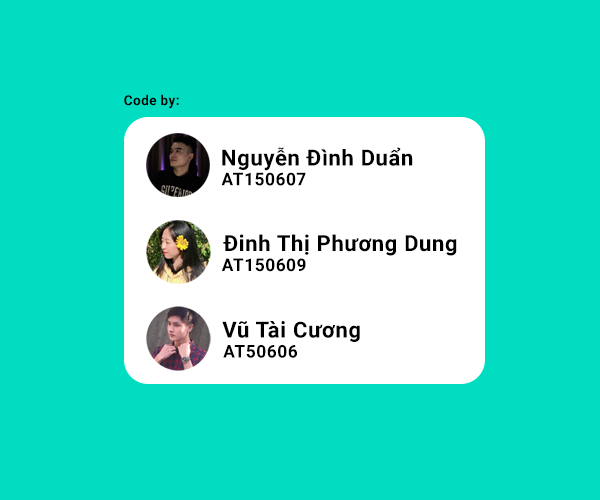
<style>
.page{position:relative;width:600px;height:500px;background:#00ddc1}
.page>*{position:absolute;margin:0}
.t1{font:13.5px "Roboto-Bold";letter-spacing:0.03em;color:#000000}
.t2{font:22px "Roboto-Bold";letter-spacing:0.03em;color:#000000}
.t3{font:17.4px "Roboto-Bold";letter-spacing:0.03em;color:#000000}
</style>
<div class="page">
<p class="t1" style="left:124px;top:94px;width:55px;height:14px">Code by:</p>
<p class="t2" style="left:222px;top:147px;width:191px;height:24px">Nguyễn Đình Duẩn</p>
<p class="t3" style="left:221px;top:172px;width:85px;height:14px">AT150607</p>
<p class="t2" style="left:223px;top:234px;width:234px;height:22px">Đinh Thị Phương Dung</p>
<p class="t3" style="left:221px;top:258px;width:85px;height:14px">AT150609</p>
<p class="t2" style="left:222px;top:321px;width:138px;height:21px">Vũ Tài Cương</p>
<p class="t3" style="left:223px;top:345px;width:74px;height:13px">AT50606</p>
</div>
